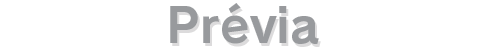
<style>
.page{position:relative;width:490px;height:50px;background:#ffffff}
.page>*{position:absolute;margin:0}
.t1{font:48px "RodinPro-B";color:#989a9d}
</style>
<div class="page">
<p class="t1" style="left:170px;top:3px;width:149px;height:41px">Prévia</p>
</div>
